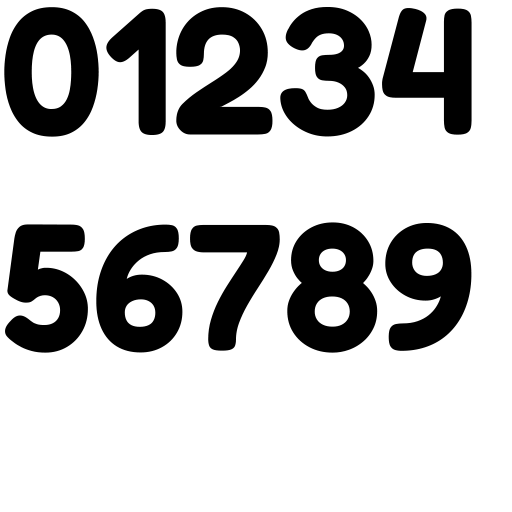
<style>
.page{position:relative;width:512px;height:512px;background:#ffffff}
.page>*{position:absolute;margin:0}
.t1{font:180px "Fredoka-SemiBold";color:#000000}
</style>
<div class="page">
<p class="t1" style="left:4px;top:7px;width:468px;height:346px;text-align:center">01234<br>56789</p>
</div>
